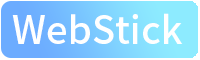
<style>
.page{position:relative;width:200px;height:60px}
.page>*{position:absolute;margin:0}
.t1{font:38px "NotoSansCJKhk-Medium";color:#ffffff}
</style>
<div class="page">
<p class="t1" style="left:12px;top:13px;width:171px;height:31px">WebStick</p>
</div>
